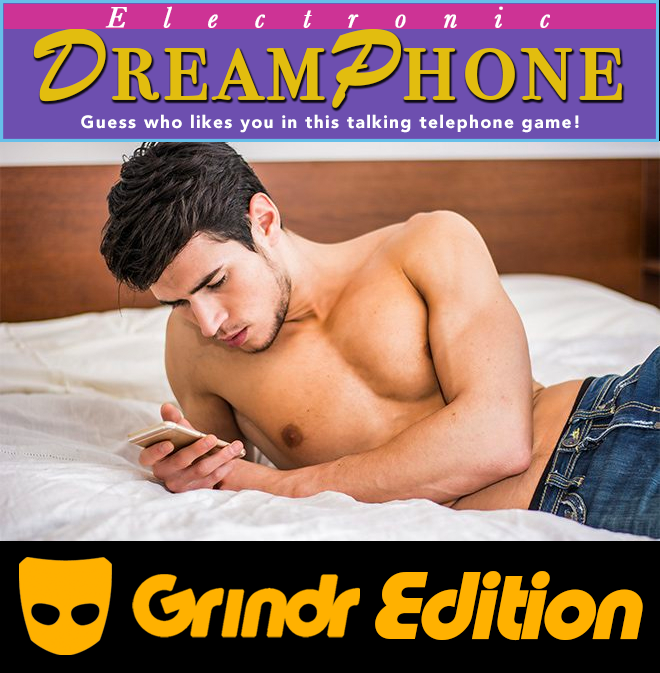
<style>
.page{position:relative;width:660px;height:673px}
.page>*{position:absolute;margin:0}
.t1{font:30.1px "Baskerville-Italic";letter-spacing:0.025em;color:#ffffff;font-weight:bold}
.t2{font:106.8px "BodoniSvtyTwoSCITCTT-Book";letter-spacing:0.025em;color:#e2bd0f;font-weight:bold}
.t3{font:106.8px "BrushScriptMT";letter-spacing:0.025em;color:#e2bd0f;font-weight:bold}
.t4{font:17.6px "Avenir-Black";letter-spacing:0.075em;color:#ffffff}
.t5{font:100.5px "PumpDemiBoldLetPlain";letter-spacing:-0.05em;color:#ffb100;font-style:italic}
</style>
<div class="page">
<p class="t1" style="left:105px;top:6px;width:445px;height:22px">E    l    e    c    t    r    o    n    i    c</p>
<p class="t2" style="left:33px;top:28px;width:589px;height:80px"><span class="t3">D</span>ream<span class="t3">P</span>hone</p>
<p class="t4" style="left:81px;top:114px;width:498px;height:19px">Guess who likes you in this talking telephone game!</p>
<p class="t5" style="left:375px;top:571px;width:268px;height:70px">Edition</p>
</div>
